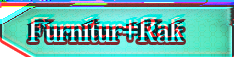
<style>
.page{position:relative;width:234px;height:57px}
.page>*{position:absolute;margin:0}
.t1{font:27px "RyuminPro-ExBold";letter-spacing:-0.08em}
</style>
<div class="page">
<p class="t1" style="left:28px;top:16px;width:156px;height:22px">Furnitur+Rak</p>
</div>
